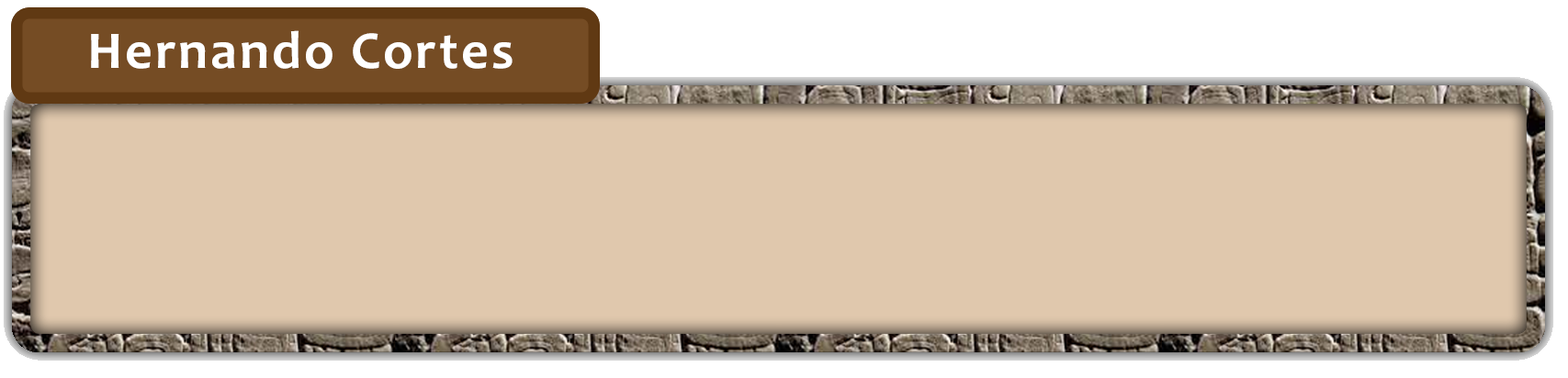
<style>
.page{position:relative;width:1568px;height:378px;background:#e0c8ad}
.page>*{position:absolute;margin:0}
.t1{font:53.6px "Candara-Bold";letter-spacing:0.05em;color:#ffffff}
</style>
<div class="page">
<p class="t1" style="left:91px;top:30px;width:422px;height:39px">Hernando Cortes</p>
</div>
